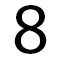
<style>
.page{position:relative;width:60px;height:60px;background:#ffffff}
.page>*{position:absolute;margin:0}
.t1{font:72px "MyriadPro-Regular";color:#000000}
</style>
<div class="page">
<p class="t1" style="left:14px;top:5px;width:33px;height:49px">8</p>
</div>
